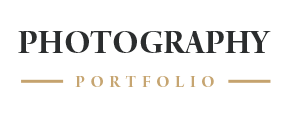
<style>
.page{position:relative;width:296px;height:116px;background:#ffffff}
.page>*{position:absolute;margin:0}
.t1{font:36.2px "ArnoPro-BoldDisplay";color:#2b2d2e;text-transform:uppercase}
.t2{font:18.1px "ArnoPro-BoldDisplay";letter-spacing:0.3em;color:#c6a571;text-transform:uppercase}
</style>
<div class="page">
<p class="t1" style="left:18px;top:31px;width:253px;height:22px">Photography</p>
<p class="t2" style="left:75px;top:76px;width:139px;height:11px">Portfolio</p>
</div>
